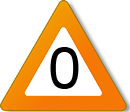
<style>
.page{position:relative;width:130px;height:112px;background:#ffffff}
.page>*{position:absolute;margin:0}
.t1{font:60.1px "ArialMT";color:#000000}
</style>
<div class="page">
<p class="t1" style="left:50px;top:47px;width:29px;height:42px">0</p>
</div>
